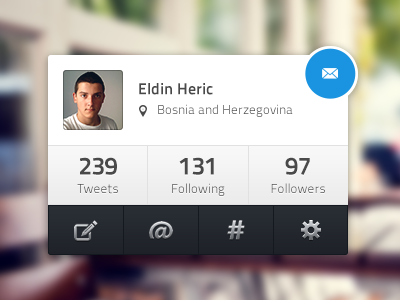
<style>
.page{position:relative;width:400px;height:300px}
.page>*{position:absolute;margin:0}
.t1{font:16px "TitilliumText14L-800wt";color:#494949}
.t2{font:13px "TitilliumText14L-250wt"}
.t3{font:25px "TitilliumText14L-800wt";color:#494949}
.t4{font:13px "TitilliumText14L-250wt";color:#494949}
</style>
<div class="page">
<p class="t1" style="left:139px;top:83px;width:74px;height:12px">Eldin Heric</p>
<p class="t2" style="left:158px;top:104px;width:135px;height:13px">Bosnia and Herzegovina</p>
<p class="t3" style="left:80px;top:157px;width:37px;height:18px">239</p>
<p class="t3" style="left:179px;top:157px;width:35px;height:18px">131</p>
<p class="t3" style="left:285px;top:157px;width:25px;height:18px">97</p>
<p class="t4" style="left:77px;top:184px;width:41px;height:10px">Tweets</p>
<p class="t2" style="left:172px;top:183px;width:53px;height:13px">Following</p>
<p class="t4" style="left:271px;top:183px;width:54px;height:10px">Followers</p>
</div>
